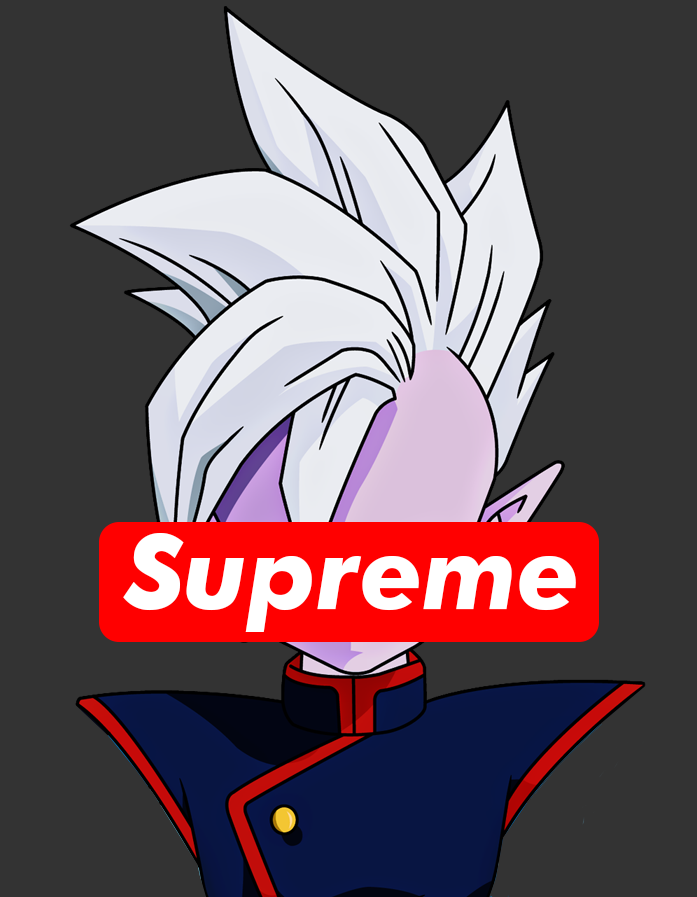
<style>
.page{position:relative;width:697px;height:897px;background:#333333}
.page>*{position:absolute;margin:0}
.t1{font:104.2px "FuturaBT-BoldItalic";color:#ffffff}
</style>
<div class="page">
<p class="t1" style="left:123px;top:533px;width:453px;height:99px">Supreme</p>
</div>
